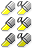
<style>
.page{position:relative;width:32px;height:48px;background:#ffffff}
.page>*{position:absolute;margin:0}
.t1{font:17.8px "SavoyeLetPlain";color:#2e2e2e}
.t2{font:17.8px "SavoyeLetPlain";color:#000000}
</style>
<div class="page">
<p class="t1" style="left:17px;top:1px;width:6px;height:6px">a</p>
<p class="t2" style="left:17px;top:17px;width:6px;height:6px">a</p>
<p class="t2" style="left:17px;top:33px;width:6px;height:6px">a</p>
</div>
